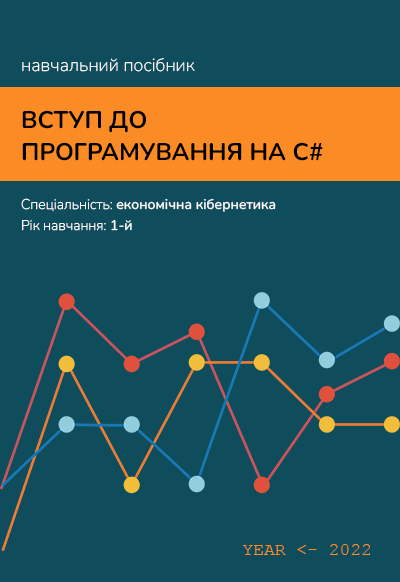
<style>
.page{position:relative;width:400px;height:582px;background:#0f4c5c}
.page>*{position:absolute;margin:0}
.t1{font:18px "Nunito-ExtraLight";color:#ffffff}
.t2{font:24px/32px "Nunito-Bold";color:#000000;text-transform:uppercase}
.t3{font:14px/21px "Nunito-Medium";color:#ffffff}
.t4{font:14px/21px "Nunito-ExtraLight";color:#ffffff}
.t5{font:18px "CourierNewPSMT";color:#fb8b24;text-transform:uppercase}
</style>
<div class="page">
<p class="t1" style="left:22px;top:58px;width:173px;height:14px">навчальний посібник</p>
<p class="t2" style="left:22px;top:110px;width:301px;height:51px">ВСТУП ДО <br>ПРОГРАМУВАННЯ НА C#</p>
<p class="t3" style="left:21px;top:198px;width:255px;height:33px"><span class="t4">Спеціальність: </span>економічна кібернетика<br><span class="t4">Рік навчання: </span>1-й</p>
<p class="t5" style="left:243px;top:544px;width:127px;height:11px">year &lt;- 2022</p>
</div>
